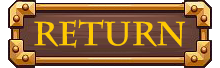
<style>
.page{position:relative;width:220px;height:68px}
.page>*{position:absolute;margin:0}
.t1{font:33px "CharlemagneStd-Bold";color:#fec901}
</style>
<div class="page">
<p class="t1" style="left:34px;top:19px;width:152px;height:29px">return</p>
</div>
